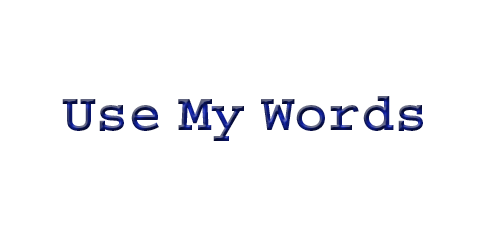
<style>
.page{position:relative;width:480px;height:240px;background:#ffffff}
.page>*{position:absolute;margin:0}
.t1{font:54.6px "CourierStd-Bold"}
</style>
<div class="page">
<p class="t1" style="left:62px;top:96px;width:361px;height:45px">Use My Words</p>
</div>
